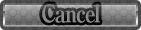
<style>
.page{position:relative;width:141px;height:30px}
.page>*{position:absolute;margin:0}
.t1{font:24px "RyuminPro-ExBold";letter-spacing:-0.08em;color:#8b8b8b;scale:0.9 1}
</style>
<div class="page">
<p class="t1" style="left:42px;top:4px;width:58px;height:19px">Cancel</p>
</div>
